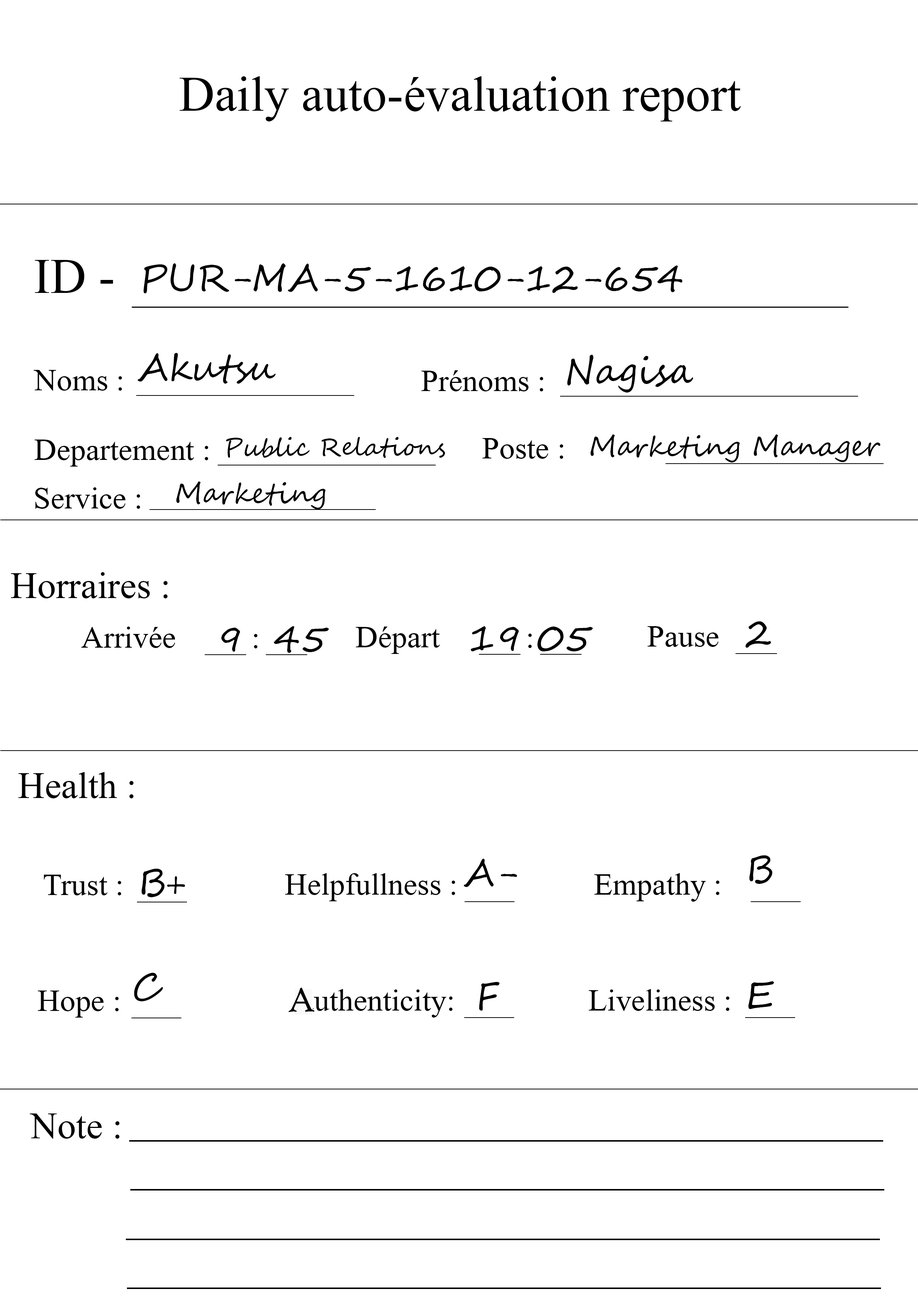
<style>
.page{position:relative;width:918px;height:1299px;background:#ffffff}
.page>*{position:absolute;margin:0}
.t1{font:74px "Microsoft-Himalaya";color:#000000}
.t2{font:37px "SegoeScript";color:#000000}
.t3{font:46.3px "Microsoft-Himalaya";color:#000000}
.t4{font:24.7px "SegoeScript";color:#000000}
.t5{font:27.8px "SegoeScript";color:#000000}
.t6{font:55.5px "Microsoft-Himalaya";color:#000000}
.t7{font:37px "HighTowerText-Reg";color:#000000}
</style>
<div class="page">
<p class="t1" style="left:180px;top:76px;width:561px;height:45px">Daily auto-évaluation report</p>
<p class="t1" style="left:35px;top:260px;width:78px;height:33px">ID -</p>
<p class="t2" style="left:143px;top:263px;width:540px;height:30px">PUR-MA-5-1610-12-654</p>
<p class="t2" style="left:138px;top:353px;width:138px;height:31px">Akutsu</p>
<p class="t2" style="left:567px;top:355px;width:126px;height:37px">Nagisa</p>
<p class="t3" style="left:34px;top:370px;width:88px;height:21px">Noms :</p>
<p class="t3" style="left:421px;top:370px;width:122px;height:21px">Prénoms :</p>
<p class="t4" style="left:226px;top:437px;width:219px;height:21px">Public Relations</p>
<p class="t3" style="left:482px;top:438px;width:81px;height:21px">Poste :</p>
<p class="t5" style="left:591px;top:434px;width:290px;height:28px">Marketing Manager</p>
<p class="t3" style="left:34px;top:439px;width:174px;height:27px">Departement :</p>
<p class="t5" style="left:176px;top:481px;width:150px;height:28px">Marketing</p>
<p class="t3" style="left:35px;top:487px;width:105px;height:22px">Service :</p>
<p class="t6" style="left:11px;top:572px;width:157px;height:26px">Horraires :</p>
<p class="t3" style="left:81px;top:626px;width:94px;height:22px">Arrivée</p>
<p class="t2" style="left:221px;top:626px;width:108px;height:27px">9  45</p>
<p class="t3" style="left:356px;top:626px;width:84px;height:28px">Départ</p>
<p class="t2" style="left:471px;top:626px;width:122px;height:25px">19 05</p>
<p class="t3" style="left:648px;top:626px;width:71px;height:21px">Pause</p>
<p class="t2" style="left:746px;top:621px;width:25px;height:27px">2</p>
<p class="t3" style="left:254px;top:634px;width:4px;height:14px">:</p>
<p class="t3" style="left:528px;top:633px;width:4px;height:15px">:</p>
<p class="t6" style="left:18px;top:772px;width:116px;height:26px">Health :</p>
<p class="t2" style="left:749px;top:855px;width:24px;height:29px">B</p>
<p class="t2" style="left:141px;top:869px;width:44px;height:28px">B+</p>
<p class="t2" style="left:464px;top:859px;width:53px;height:28px">A-</p>
<p class="t3" style="left:44px;top:874px;width:77px;height:21px">Trust :</p>
<p class="t3" style="left:285px;top:873px;width:170px;height:28px">Helpfullness :</p>
<p class="t3" style="left:594px;top:873px;width:126px;height:28px">Empathy :</p>
<p class="t2" style="left:134px;top:973px;width:29px;height:28px">C</p>
<p class="t7" style="left:288px;top:987px;width:27px;height:25px">A</p>
<p class="t3" style="left:301px;top:989px;width:152px;height:28px">authenticity:</p>
<p class="t2" style="left:479px;top:981px;width:21px;height:30px">F</p>
<p class="t3" style="left:589px;top:989px;width:141px;height:22px">Liveliness :</p>
<p class="t2" style="left:748px;top:981px;width:26px;height:28px">E</p>
<p class="t3" style="left:38px;top:990px;width:81px;height:27px">Hope :</p>
<p class="t6" style="left:30px;top:1113px;width:90px;height:25px">Note :</p>
</div>
